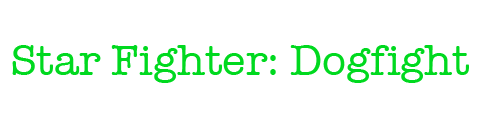
<style>
.page{position:relative;width:480px;height:120px;background:#ffffff}
.page>*{position:absolute;margin:0}
.t1{font:44px "AmericanTypewriter";color:#00d91f}
</style>
<div class="page">
<p class="t1" style="left:12px;top:45px;width:457px;height:38px">Star Fighter: Dogfight</p>
</div>
